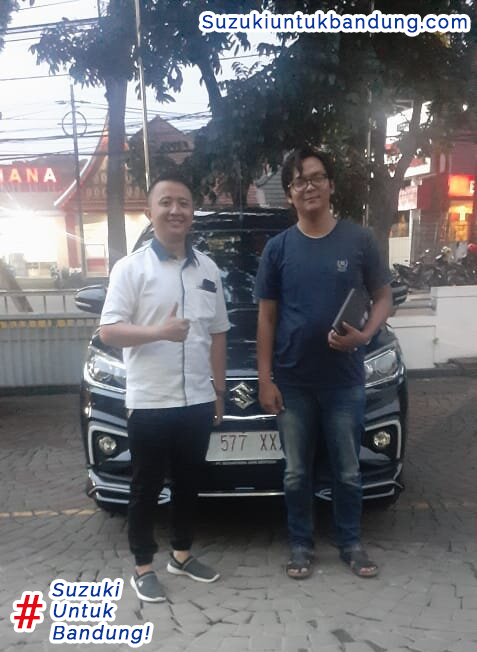
<style>
.page{position:relative;width:477px;height:652px}
.page>*{position:absolute;margin:0}
.t1{font:18px "Raleway-Regular";letter-spacing:0.1em;color:#04369b;font-weight:bold}
.t2{font:17.9px "Raleway-Regular";letter-spacing:0.1em;color:#04369b;font-weight:bold;font-style:italic}
.t3{font:45.2px "Tahoma";letter-spacing:0.1em;color:#e20a17;font-weight:bold}
</style>
<div class="page">
<p class="t1" style="left:202px;top:14px;width:265px;height:19px">Suzukiuntukbandung.com</p>
<p class="t2" style="left:52px;top:582px;width:98px;height:62px">Suzuki<br>Untuk<br>Bandung!</p>
<p class="t3" style="left:14px;top:595px;width:29px;height:34px">#</p>
</div>
